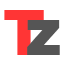
<style>
.page{position:relative;width:64px;height:64px;background:#ffffff}
.page>*{position:absolute;margin:0}
.t1{font:62.5px "Montserrat-Bold";color:#ff3535;font-weight:bold}
.t2{font:62.5px "Montserrat-Bold";color:#555555;font-weight:bold}
</style>
<div class="page">
<p class="t1" style="left:4px;top:10px;width:40px;height:45px">T</p>
<p class="t2" style="left:27px;top:20px;width:33px;height:35px">z</p>
</div>
